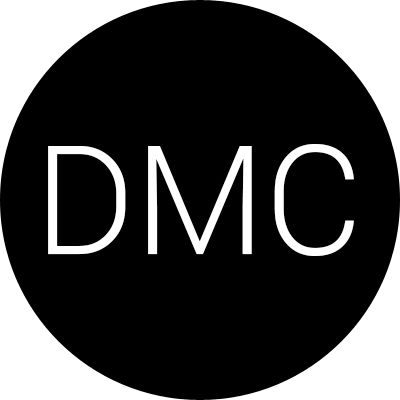
<style>
.page{position:relative;width:400px;height:400px;background:#000000}
.page>*{position:absolute;margin:0}
.t1{font:151.8px "Roboto-Light";color:#ffffff}
</style>
<div class="page">
<p class="t1" style="left:48px;top:144px;width:306px;height:112px">DMC</p>
</div>
